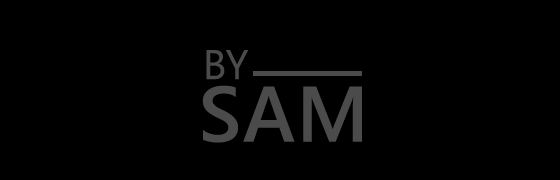
<style>
.page{position:relative;width:560px;height:180px;background:#010001}
.page>*{position:absolute;margin:0}
.t1{font:41.2px "SegoeUI";letter-spacing:0.02em;color:#4c4b4c}
.t2{font:78.3px "SegoeUI-Semibold";letter-spacing:0.02em;color:#4c4b4c}
</style>
<div class="page">
<p class="t1" style="left:206px;top:50px;width:42px;height:30px">BY</p>
<p class="t2" style="left:202px;top:85px;width:160px;height:58px">SAM</p>
</div>
